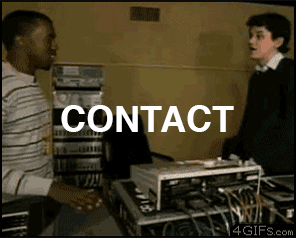
<style>
.page{position:relative;width:296px;height:238px}
.page>*{position:absolute;margin:0}
.t1{font:36px "Helvetica-Bold";color:#ffffff}
</style>
<div class="page">
<p class="t1" style="left:61px;top:105px;width:173px;height:27px">CONTACT</p>
</div>
